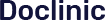
<style>
.page{position:relative;width:105px;height:20px;background:#ffffff}
.page>*{position:absolute;margin:0}
.t1{font:28px "Rubik-Medium";color:#12143b}
</style>
<div class="page">
<p class="t1" style="left:0px;top:0px;width:105px;height:20px">Doclinic</p>
</div>
